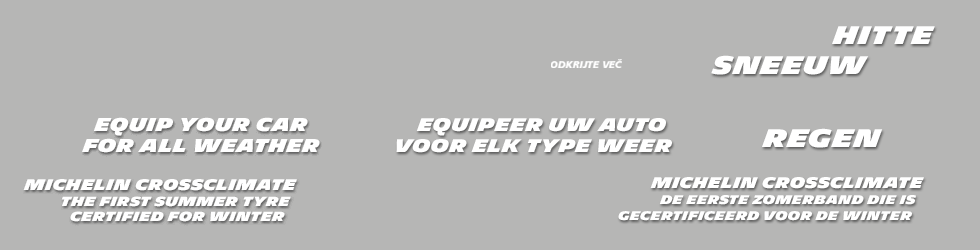
<style>
.page{position:relative;width:980px;height:250px;background:#b6b6b5}
.page>*{position:absolute;margin:0}
.t1{font:24.7px "Michelin-Black";letter-spacing:0.025em;color:#ffffff;text-transform:uppercase}
.t2{font:10.4px "FrutigerCE-BlackItalic";color:#ffffff;scale:0.96 1}
.t3{font:17.7px "Michelin-Black";letter-spacing:0.025em;color:#ffffff;text-transform:uppercase}
.t4{font:15px "Michelin-Black";letter-spacing:0.025em;color:#ffffff;text-transform:uppercase}
.t5{font:12px "Michelin-Black";letter-spacing:0.025em;color:#ffffff;text-transform:uppercase}
</style>
<div class="page">
<p class="t1" style="left:832px;top:26px;width:103px;height:18px">hitte</p>
<p class="t2" style="left:551px;top:59px;width:71px;height:9px">ODKRIJTE VEČ</p>
<p class="t1" style="left:711px;top:55px;width:158px;height:20px">sneeuw</p>
<p class="t3" style="left:396px;top:118px;width:276px;height:35px;text-align:right">EQUIPEER UW AUTO <br>VOOR ELK TYPE WEER</p>
<p class="t1" style="left:762px;top:128px;width:121px;height:20px">regen</p>
<p class="t4" style="left:650px;top:177px;width:274px;height:12px">michelin crossclimate</p>
<p class="t5" style="left:659px;top:195px;width:257px;height:10px">DE EERSTE ZOMERBAND DIE IS</p>
<p class="t5" style="left:618px;top:211px;width:294px;height:10px">GECERTIFICEERD VOOR DE WINTER</p>
</div>
